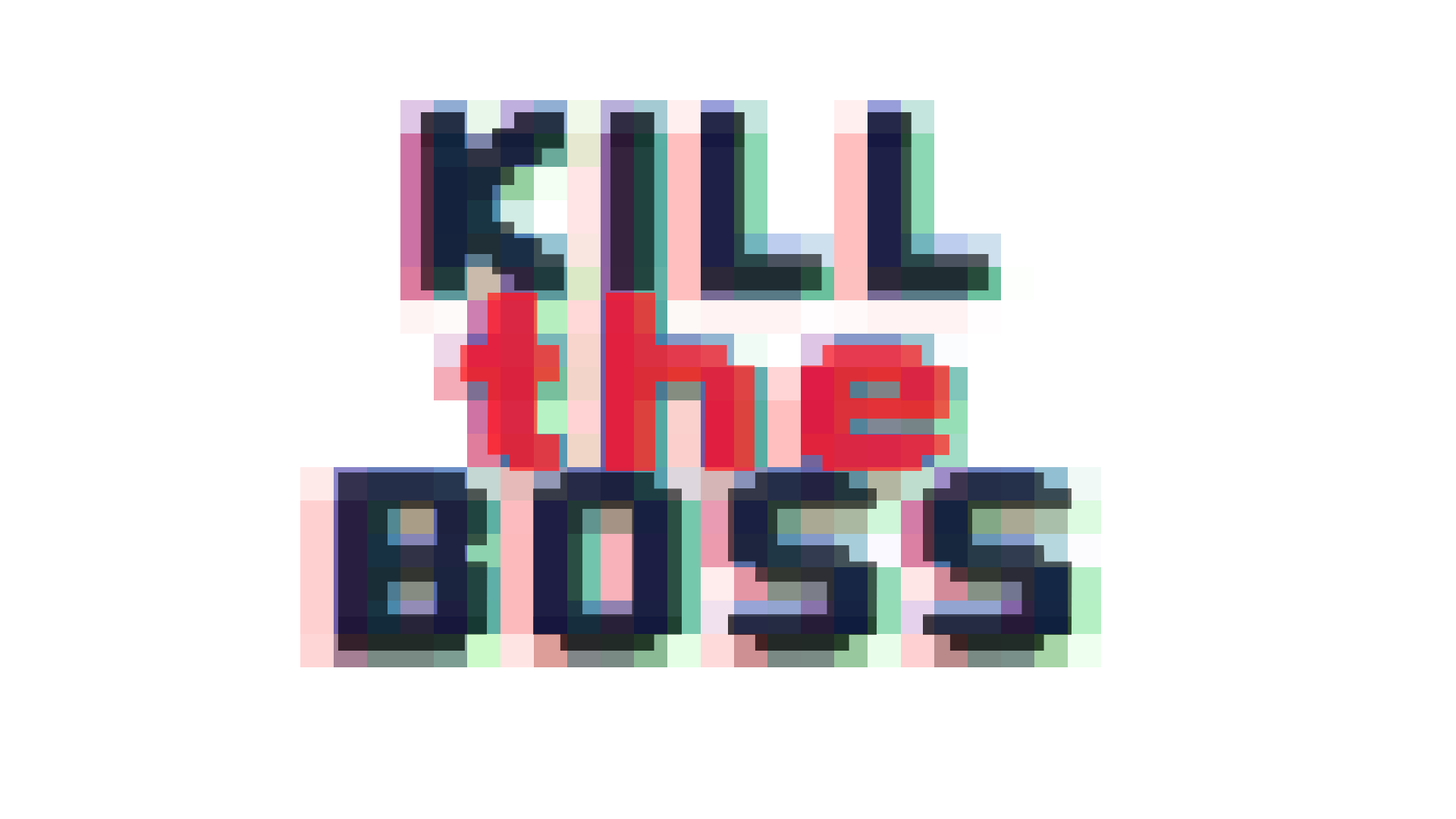
<style>
.page{position:relative;width:1456px;height:819px;background:#ffffff}
.page>*{position:absolute;margin:0}
.t1{font:270.2px/179.9px "Silom-Bold";scale:1.36 1}
</style>
<div class="page">
<p class="t1" style="left:338px;top:112px;width:734px;height:539px;text-align:center">KILL<br>the<br>BOSS</p>
</div>
